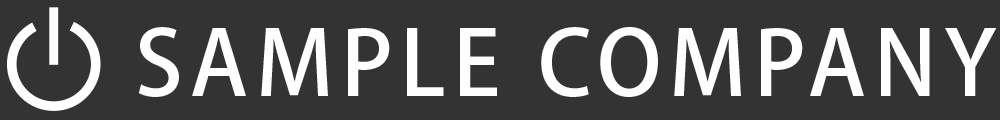
<style>
.page{position:relative;width:1000px;height:120px;background:#333333}
.page>*{position:absolute;margin:0}
.t1{font:88.8px "KozGoPro-Medium";letter-spacing:0.1em;color:#ffffff}
</style>
<div class="page">
<p class="t1" style="left:138px;top:27px;width:859px;height:70px">SAMPLE COMPANY</p>
</div>
